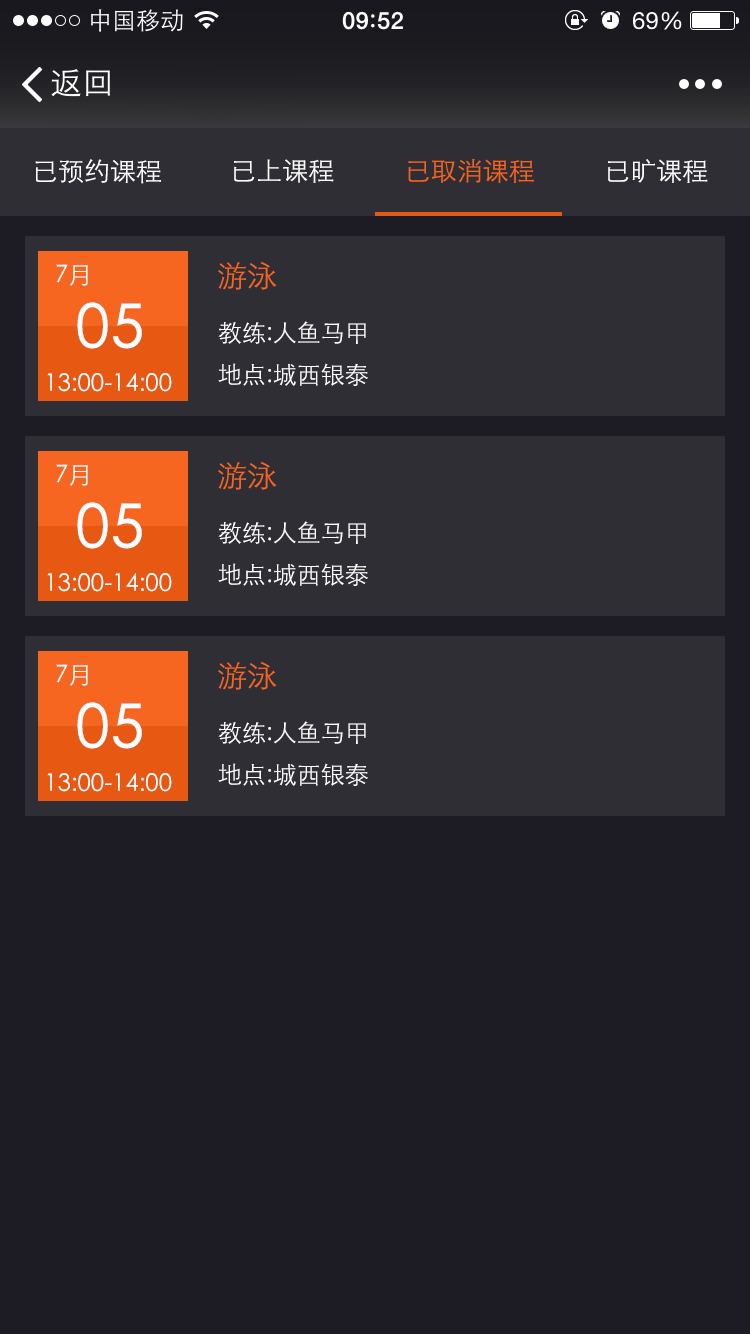
<style>
.page{position:relative;width:750px;height:1334px;background:#1d1c24}
.page>*{position:absolute;margin:0}
.t1{font:26px "STXihei";color:#ffffff}
.t2{font:26px "STXihei";color:#f66620}
.t3{font:24px "STXihei";color:#ffffff}
.t4{font:30px "STXihei";color:#f66620}
.t5{font:60px "STXihei";color:#ffffff;font-weight:bold}
.t6{font:24px/42px "STXihei";color:#ffffff}
</style>
<div class="page">
<p class="t1" style="left:35px;top:159px;width:126px;height:25px">已预约课程</p>
<p class="t1" style="left:234px;top:159px;width:100px;height:24px">已上课程</p>
<p class="t2" style="left:408px;top:158px;width:126px;height:25px">已取消课程</p>
<p class="t1" style="left:608px;top:159px;width:100px;height:24px">已旷课程</p>
<p class="t3" style="left:56px;top:264px;width:32px;height:22px">7月</p>
<p class="t4" style="left:218px;top:261px;width:59px;height:29px">游泳</p>
<p class="t5" style="left:77px;top:302px;width:65px;height:47px">05</p>
<p class="t6" style="left:218px;top:321px;width:150px;height:65px">教练:人鱼马甲<br>地点:城西银泰</p>
<p class="t3" style="left:47px;top:373px;width:125px;height:19px">13:00-14:00</p>
<p class="t4" style="left:218px;top:461px;width:59px;height:29px">游泳</p>
<p class="t3" style="left:56px;top:464px;width:32px;height:22px">7月</p>
<p class="t5" style="left:77px;top:502px;width:65px;height:47px">05</p>
<p class="t6" style="left:218px;top:521px;width:150px;height:65px">教练:人鱼马甲<br>地点:城西银泰</p>
<p class="t3" style="left:47px;top:573px;width:125px;height:19px">13:00-14:00</p>
<p class="t3" style="left:56px;top:664px;width:32px;height:22px">7月</p>
<p class="t4" style="left:218px;top:661px;width:59px;height:29px">游泳</p>
<p class="t5" style="left:77px;top:702px;width:65px;height:47px">05</p>
<p class="t6" style="left:218px;top:721px;width:150px;height:65px">教练:人鱼马甲<br>地点:城西银泰</p>
<p class="t3" style="left:47px;top:773px;width:125px;height:19px">13:00-14:00</p>
</div>
